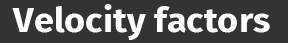
<style>
.page{position:relative;width:288px;height:43px;background:#333333}
.page>*{position:absolute;margin:0}
.t1{font:34.2px "FiraSans-Bold";color:#ffffff;scale:1.05 1}
</style>
<div class="page">
<p class="t1" style="left:12px;top:4px;width:258px;height:36px">Velocity factors</p>
</div>
